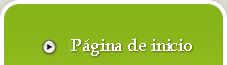
<style>
.page{position:relative;width:227px;height:65px;background:#87b41b}
.page>*{position:absolute;margin:0}
.t1{font:18px "BookAntiqua";letter-spacing:-0.02em;color:#ffffff}
</style>
<div class="page">
<p class="t1" style="left:71px;top:38px;width:121px;height:18px">Página de inicio</p>
</div>
